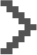
<style>
.page{position:relative;width:37px;height:55px;background:#ffffff}
.page>*{position:absolute;margin:0}
.t1{font:96px "Fixedsys";color:#535353}
</style>
<div class="page">
<p class="t1" style="left:0px;top:0px;width:37px;height:55px">&gt;</p>
</div>
